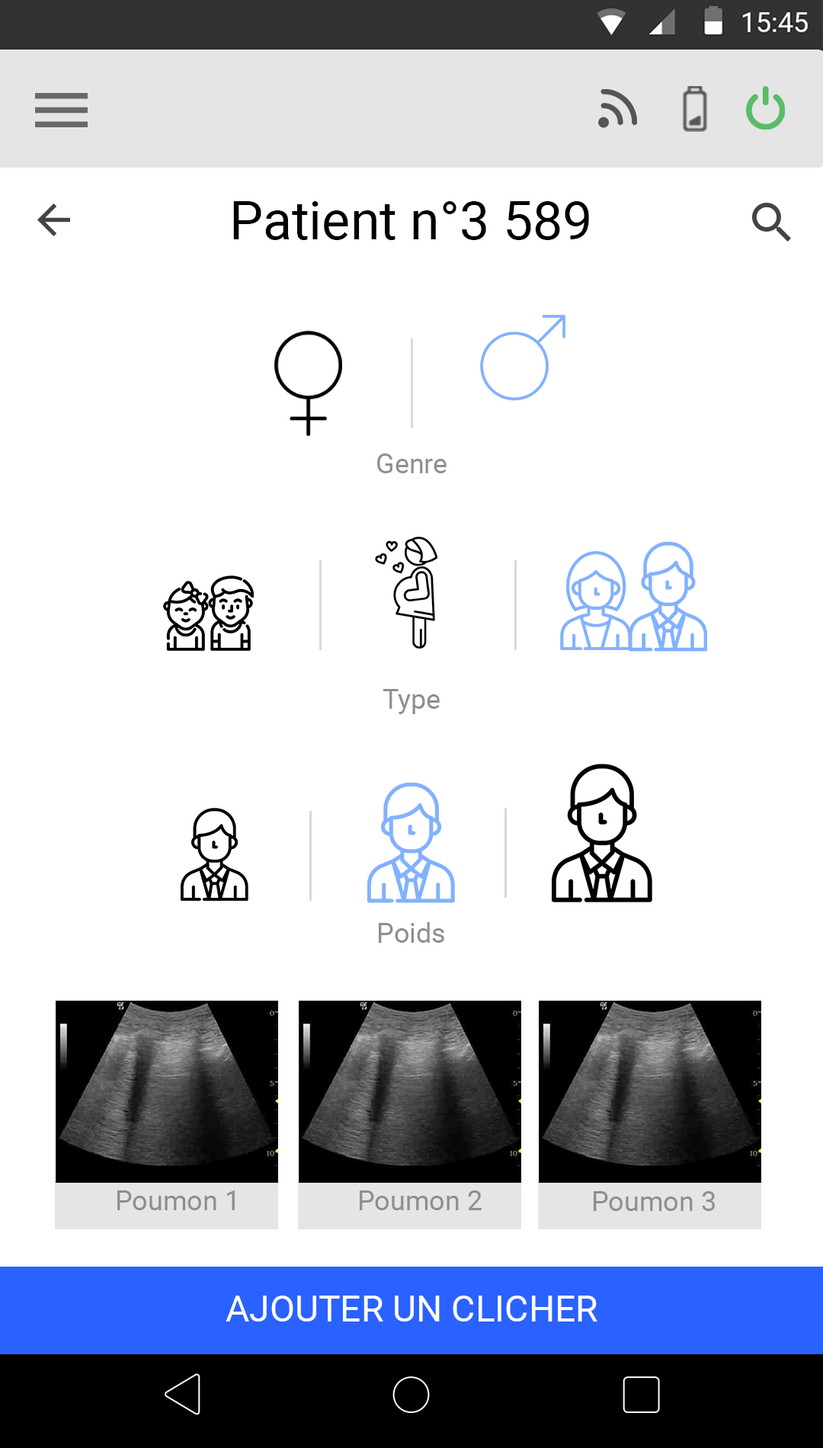
<style>
.page{position:relative;width:823px;height:1448px;background:#ffffff}
.page>*{position:absolute;margin:0}
.t1{font:53.4px "Roboto-Regular";color:#000000}
.t2{font:27.4px "Roboto-Regular";color:#8e8e8f}
.t3{font:36.6px "Roboto-Regular";color:#fffefe}
</style>
<div class="page">
<p class="t1" style="left:233px;top:201px;width:356px;height:39px">Patient n°3 589</p>
<p class="t2" style="left:377px;top:454px;width:70px;height:19px">Genre</p>
<p class="t2" style="left:383px;top:689px;width:57px;height:25px">Type</p>
<p class="t2" style="left:379px;top:922px;width:65px;height:21px">Poids</p>
<p class="t2" style="left:117px;top:1191px;width:118px;height:20px">Poumon 1</p>
<p class="t2" style="left:360px;top:1191px;width:122px;height:20px">Poumon 2</p>
<p class="t2" style="left:594px;top:1191px;width:121px;height:20px">Poumon 3</p>
<p class="t3" style="left:226px;top:1296px;width:372px;height:26px">AJOUTER UN CLICHER</p>
</div>
